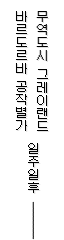
<style>
.page{position:relative;width:64px;height:240px;background:#ffffff}
.page>*{position:absolute;margin:0}
.t1{font:12px/13px "Galmuri11-Regular";color:#000000}
</style>
<div class="page">
<p class="t1" style="left:15px;top:11px;width:13px;height:63px;text-align:center">바<br>르<br>도<br>르<br>바</p>
<p class="t1" style="left:36px;top:11px;width:12px;height:50px;text-align:center">무<br>역<br>도<br>시</p>
<p class="t1" style="left:36px;top:69px;width:13px;height:63px;text-align:center">그<br>레<br>이<br>랜<br>드</p>
<p class="t1" style="left:15px;top:81px;width:13px;height:50px;text-align:center">공<br>작<br>별<br>가</p>
<p class="t1" style="left:28px;top:143px;width:11px;height:50px;text-align:center">일<br>주<br>일<br>후</p>
</div>
